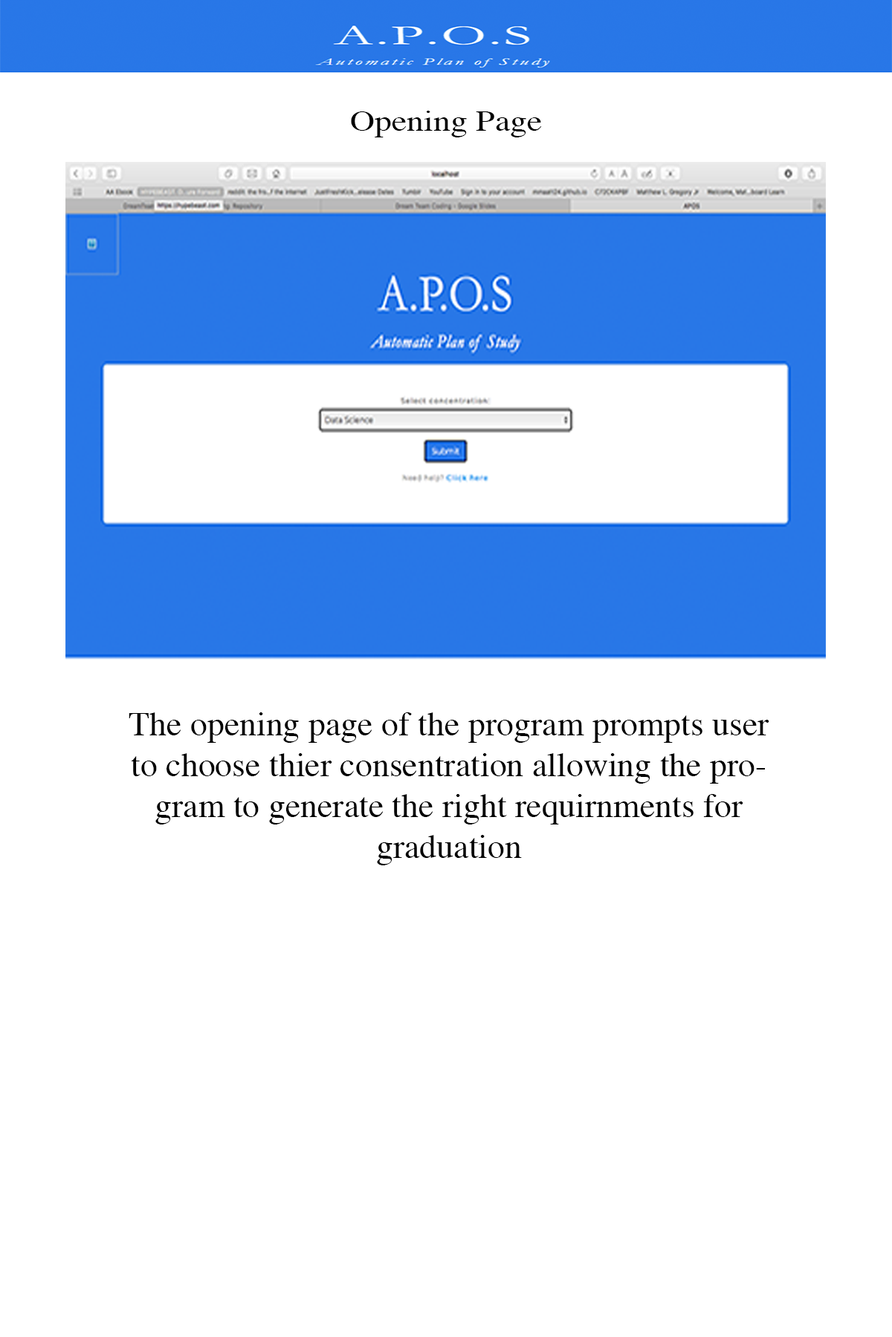
<style>
.page{position:relative;width:892px;height:1337px;background:#ffffff}
.page>*{position:absolute;margin:0}
.t1{font:29.1px "Times-Roman";color:#000000;scale:1.17 1}
.t2{font:34.1px "Times-Roman";color:#000000}
</style>
<div class="page">
<p class="t1" style="left:351px;top:111px;width:191px;height:26px">Opening Page</p>
<p class="t2" style="left:129px;top:713px;width:640px;height:153px;text-align:center">The opening page of the program prompts user to choose thier consentration allowing the program to generate the right requirnments for graduation</p>
</div>
